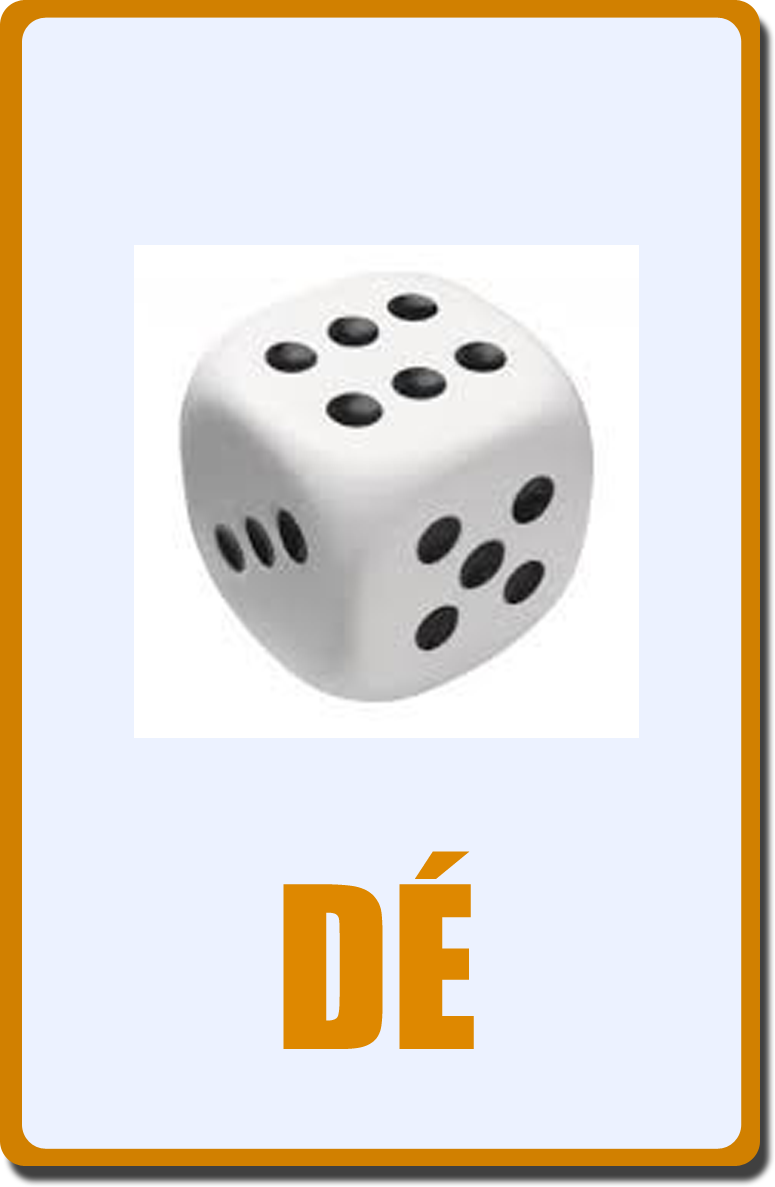
<style>
.page{position:relative;width:775px;height:1187px;background:#ecf2ff}
.page>*{position:absolute;margin:0}
.t1{font:208.3px "Impact";letter-spacing:0.005em;color:#de8800}
</style>
<div class="page">
<p class="t1" style="left:283px;top:851px;width:191px;height:198px">DÉ</p>
</div>
